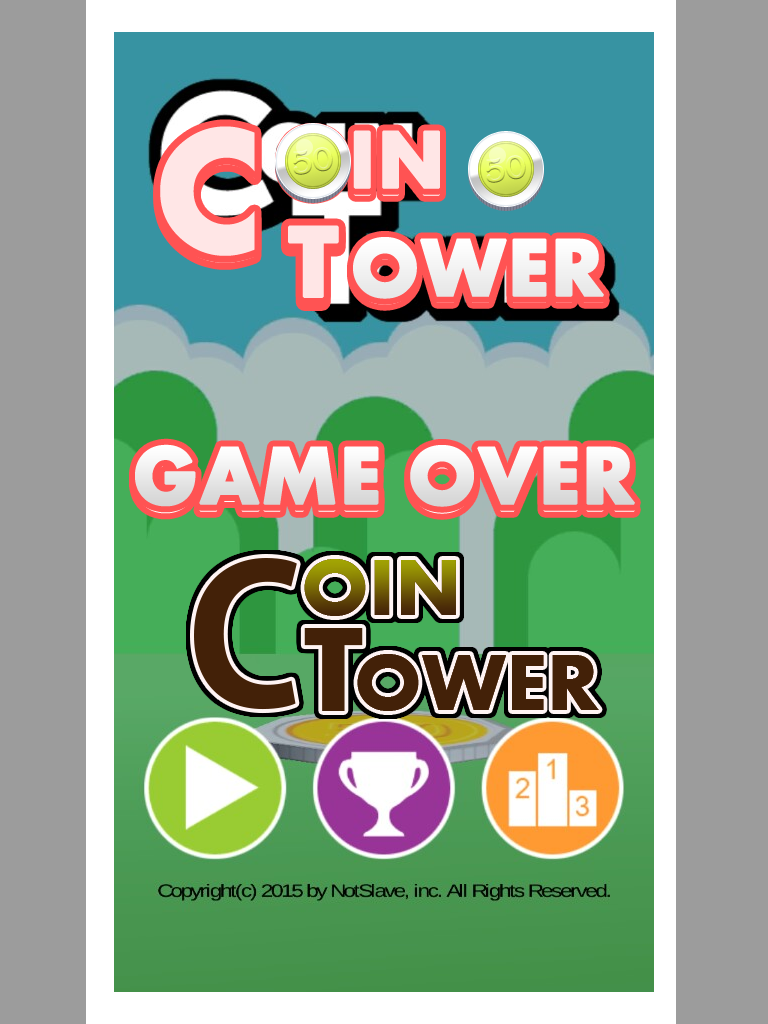
<style>
.page{position:relative;width:768px;height:1024px;background:#9c9c9c}
.page>*{position:absolute;margin:0}
.t1{font:184.9px "Aharoni-Bold";color:#ffe6e6}
.t2{font:83.3px "Aharoni-Bold";font-weight:bold}
.t3{font:104.2px "Aharoni-Bold";color:#ffe6e6;font-weight:bold}
.t4{font:83.3px "Aharoni-Bold";color:#f4efef;font-weight:bold}
.t5{font:83.3px "Aharoni-Bold";color:#f3f3f3;font-weight:bold}
.t6{font:83.3px "Aharoni-Bold";color:#eaeaea;font-weight:bold}
.t7{font:191.7px "AdobeGothicStd-Bold";color:#432108}
.t8{font:83.3px "Aharoni-Bold"}
.t9{font:125px "Aharoni-Bold";color:#432108}
.t10{font:83.3px "Aharoni-Bold";color:#432108}
</style>
<div class="page">
<p class="t1" style="left:160px;top:126px;width:95px;height:130px">C</p>
<p class="t1" style="left:160px;top:133px;width:95px;height:130px">C</p>
<p class="t2" style="left:281px;top:136px;width:159px;height:62px">OIN</p>
<p class="t2" style="left:281px;top:129px;width:159px;height:62px">OIN</p>
<p class="t3" style="left:288px;top:231px;width:51px;height:73px">T</p>
<p class="t3" style="left:288px;top:225px;width:51px;height:73px">T</p>
<p class="t4" style="left:353px;top:243px;width:251px;height:62px">OWER</p>
<p class="t5" style="left:353px;top:237px;width:251px;height:62px">OWER</p>
<p class="t6" style="left:135px;top:444px;width:500px;height:63px">GAME OVER</p>
<p class="t2" style="left:135px;top:451px;width:500px;height:63px">GAME OVER</p>
<p class="t7" style="left:194px;top:558px;width:103px;height:152px">C</p>
<p class="t8" style="left:304px;top:559px;width:152px;height:57px">OIN</p>
<p class="t8" style="left:304px;top:559px;width:152px;height:57px">OIN</p>
<p class="t9" style="left:304px;top:628px;width:59px;height:83px">T</p>
<p class="t9" style="left:304px;top:628px;width:59px;height:83px">T</p>
<p class="t10" style="left:357px;top:654px;width:242px;height:57px">OWER</p>
<p class="t10" style="left:357px;top:654px;width:242px;height:57px">OWER</p>
</div>
